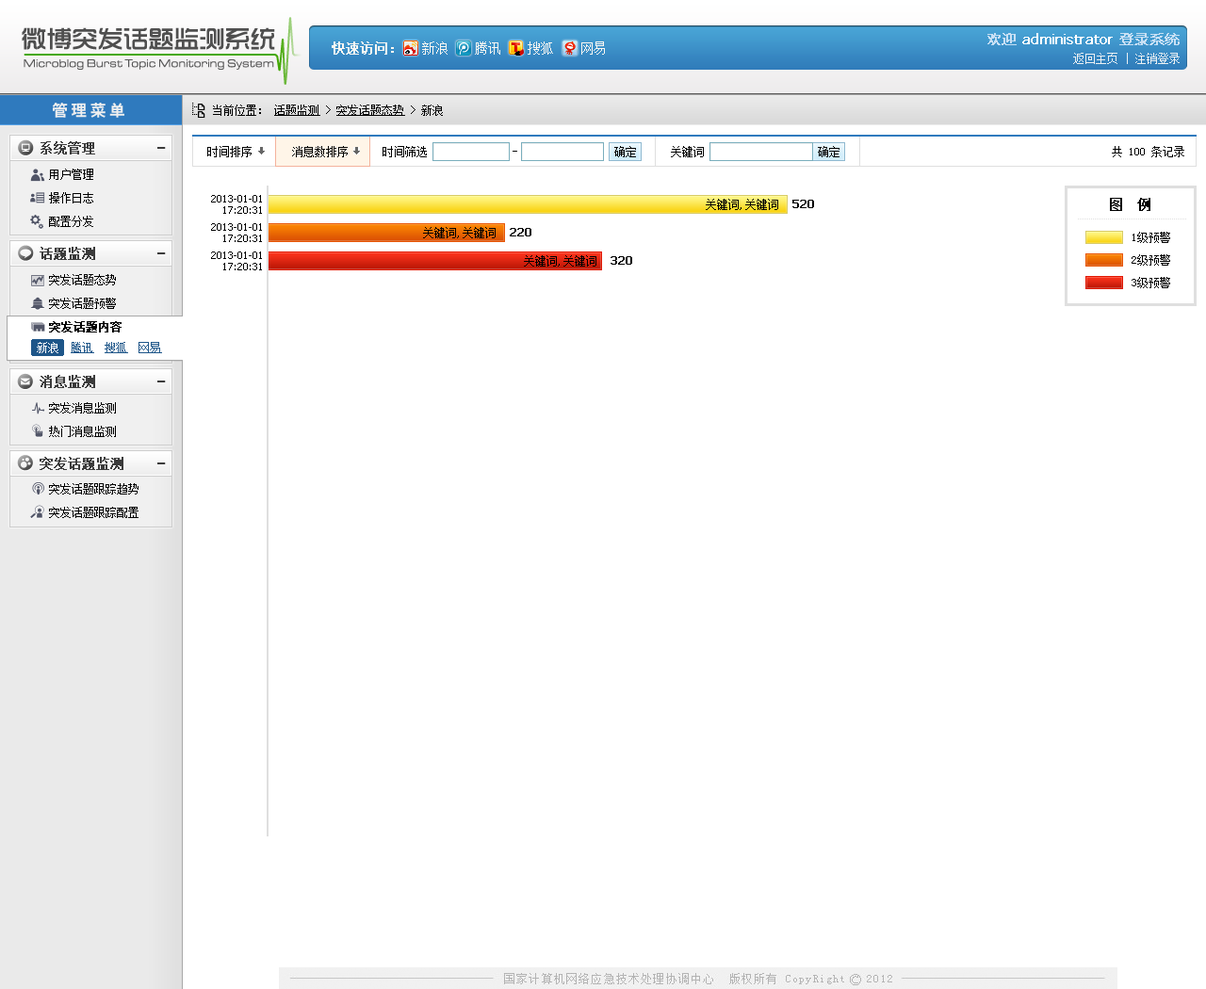
<style>
.page{position:relative;width:1206px;height:989px;background:#ffffff}
.page>*{position:absolute;margin:0}
.t1{font:25.4px "TRENDS";color:#4f4f4f}
.t2{font:13.2px "SimSun";color:#fbf7f2}
.t3{font:13.2px "SimSun";color:#fbf7f2;font-weight:bold}
.t4{font:14.1px "Tahoma";color:#ffffff;font-weight:bold}
.t5{font:14.1px "MicrosoftYaHei";color:#c8e0f4;font-weight:bold}
.t6{font:11.3px "SimSun";color:#ebf0f3}
.t7{font:11.3px "EurostileExt-Reg";color:#575757;scale:0.89 1}
.t8{font:16px "HYb2gj";letter-spacing:0.2em;color:#efefef}
.t9{font:11.3px "SimSun";color:#000000;text-decoration:underline}
.t10{font:11.3px "SimSun";color:#000000}
.t11{font:11.3px/23.5px "SimSun";color:#000000}
.t12{font:10.4px/11.3px "Tahoma";color:#000000}
.t13{font:13.2px "SimSun";color:#000000;font-weight:bold}
.t14{font:11.3px "SimSun";color:#010101}
.t15{font:11.3px "Tahoma";color:#010101;font-weight:bold}
.t16{font:11.3px/22.6px "SimSun";color:#000000}
.t17{font:11.3px/23.5px "SimSun";color:#000000;font-weight:bold}
.t18{font:11.3px "SimSun";color:#1e5689;text-decoration:underline}
.t19{font:11.3px "SimSun";color:#ffffff}
</style>
<div class="page">
<p class="t1" style="left:22px;top:27px;width:253px;height:23px">微博突发话题监测系统</p>
<p class="t2" style="left:332px;top:41px;width:273px;height:14px"><span class="t3">快速访问：</span>   新浪    腾讯    搜狐    网易</p>
<p class="t4" style="left:987px;top:33px;width:192px;height:12px"><span class="t5">欢迎 </span>administrator <span class="t5">登录系统</span></p>
<p class="t6" style="left:1073px;top:53px;width:106px;height:11px">返回主页 | 注销登录</p>
<p class="t7" style="left:24px;top:59px;width:250px;height:11px">Microblog Burst Topic Monitoring System</p>
<p class="t8" style="left:52px;top:103px;width:72px;height:15px">管理菜单</p>
<p class="t9" style="left:213px;top:105px;width:230px;height:11px"><span class="t10">当前位置： </span>话题监测<span class="t10"> &gt; </span>突发话题态势<span class="t10"> &gt; 新浪</span></p>
<p class="t10" style="left:207px;top:146px;width:977px;height:11px">时间排序    消息数排序  时间筛选   -   确定     关键词    确定            共 100 条记录</p>
<p class="t11" style="left:49px;top:169px;width:44px;height:58px">用户管理<br>操作日志<br>配置分发</p>
<p class="t12" style="left:211px;top:195px;width:51px;height:19px;text-align:right">2013-01-01<br>17:20:31</p>
<p class="t13" style="left:1110px;top:198px;width:40px;height:13px">图　例</p>
<p class="t14" style="left:706px;top:199px;width:108px;height:11px"><span class="t15"> </span>关键词,关键词  <span class="t15">520</span></p>
<p class="t12" style="left:211px;top:223px;width:51px;height:19px;text-align:right">2013-01-01<br>17:20:31</p>
<p class="t14" style="left:423px;top:227px;width:108px;height:11px">关键词,关键词  <span class="t15">220</span></p>
<p class="t16" style="left:1131px;top:232px;width:39px;height:56px">1级预警<br>2级预警<br>3级预警</p>
<p class="t12" style="left:211px;top:251px;width:51px;height:19px;text-align:right">2013-01-01<br>17:20:31</p>
<p class="t14" style="left:524px;top:255px;width:108px;height:12px">关键词,关键词  <span class="t15">320</span></p>
<p class="t11" style="left:49px;top:274px;width:73px;height:59px">突发话题态势<br>突发话题预警<br><span class="t17">突发话题内容</span></p>
<p class="t18" style="left:37px;top:342px;width:125px;height:11px"><span class="t19">新浪  </span>腾讯  搜狐  网易</p>
<p class="t11" style="left:49px;top:402px;width:67px;height:35px">突发消息监测<br>热门消息监测</p>
<p class="t11" style="left:49px;top:483px;width:89px;height:35px">突发话题跟踪趋势<br>突发话题跟踪配置</p>
</div>
